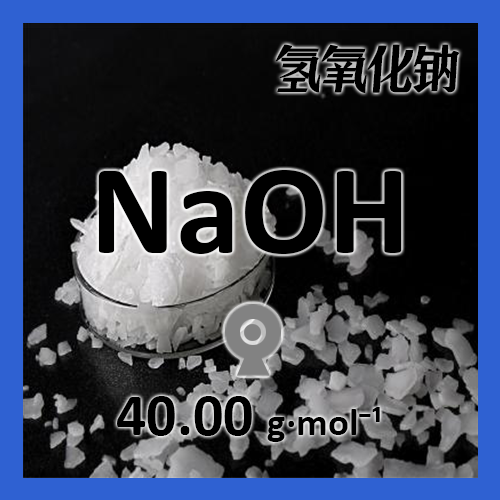
<style>
.page{position:relative;width:500px;height:500px}
.page>*{position:absolute;margin:0}
.t1{font:48px "ZoomlaShuaisongA028";color:#000000;font-weight:bold;scale:0.93 1}
.t2{font:130px "Calibri-Bold";color:#000000}
.t3{font:39px "Calibri-Bold";color:#000000}
.t4{font:60px "Calibri-Bold";color:#000000}
</style>
<div class="page">
<p class="t1" style="left:275px;top:44px;width:185px;height:49px">氢氧化钠</p>
<p class="t2" style="left:98px;top:170px;width:304px;height:84px">NaOH</p>
<p class="t3" style="left:117px;top:396px;width:263px;height:46px"><span class="t4">40.00 </span>g·mol⁻¹</p>
</div>
